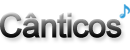
<style>
.page{position:relative;width:130px;height:50px;background:#ffffff}
.page>*{position:absolute;margin:0}
.t1{font:33px "ArialMT";letter-spacing:-0.05em;font-weight:bold}
</style>
<div class="page">
<p class="t1" style="left:0px;top:12px;width:122px;height:26px">Cânticos</p>
</div>
